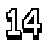
<style>
.page{position:relative;width:48px;height:48px;background:#ffffff}
.page>*{position:absolute;margin:0}
.t1{font:36px "KarmaFuture-Regular";color:#010101}
</style>
<div class="page">
<p class="t1" style="left:6px;top:8px;width:36px;height:32px">14</p>
</div>
